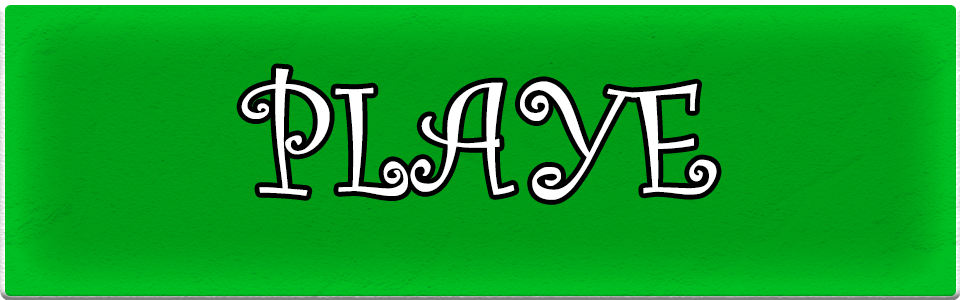
<style>
.page{position:relative;width:960px;height:300px;background:#009d16}
.page>*{position:absolute;margin:0}
.t1{font:160px "CurlzMT";color:#ffffff;font-weight:bold}
</style>
<div class="page">
<p class="t1" style="left:241px;top:68px;width:476px;height:132px">PLAYE</p>
</div>
